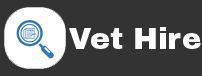
<style>
.page{position:relative;width:202px;height:76px;background:#333333}
.page>*{position:absolute;margin:0}
.t1{font:30px "ArchivoBlack-Regular";letter-spacing:-0.005em;color:#ffffff}
</style>
<div class="page">
<p class="t1" style="left:69px;top:27px;width:132px;height:22px">Vet Hire</p>
</div>
